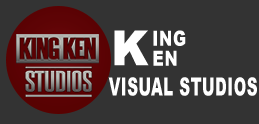
<style>
.page{position:relative;width:259px;height:124px;background:#333333}
.page>*{position:absolute;margin:0}
.t1{font:48.4px "Arial-Black";letter-spacing:0.04em;color:#ffffff;scale:0.92 1}
.t2{font:20.9px/20px "Arial-Black";letter-spacing:0.04em;color:#ffffff;scale:0.77 1}
.t3{font:25.3px "Arial-Black";letter-spacing:0.04em;color:#ffffff;scale:0.59 1}
</style>
<div class="page">
<p class="t1" style="left:114px;top:30px;width:35px;height:36px">K</p>
<p class="t2" style="left:153px;top:30px;width:33px;height:36px">ING<br>EN</p>
<p class="t3" style="left:108px;top:77px;width:149px;height:19px">VISUAL STUDIOS</p>
</div>
